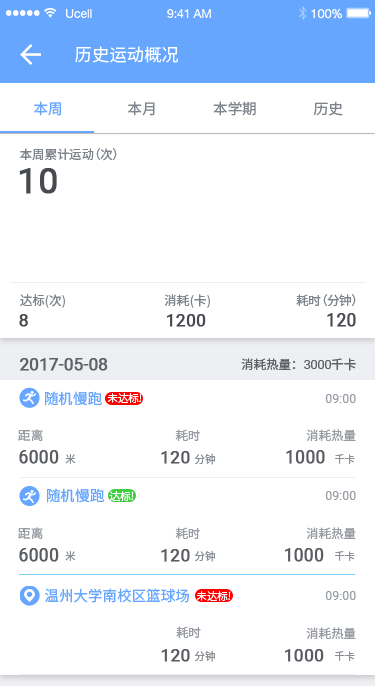
<style>
.page{position:relative;width:375px;height:686px;background:#ffffff}
.page>*{position:absolute;margin:0}
.t1{font:17.3px "NotoSansHans-Regular";color:#ffffff}
.t2{font:14.6px "NotoSansHans-Regular";color:#66a6ff}
.t3{font:14.5px "NotoSansHans-Regular";color:#7e848c}
.t4{font:12.5px "NotoSansHans-Regular";color:#7e848c}
.t5{font:34.9px "Roboto-Regular";color:#474a4f;font-weight:bold}
.t6{font:17.5px "Roboto-Regular";color:#474a4f;font-weight:bold}
.t7{font:17.4px "Roboto-Regular";color:#474a4f;font-weight:bold}
.t8{font:16.6px "Roboto-Regular";color:#5e6166;font-weight:bold}
.t9{font:12.5px "NotoSansHans-Regular";color:#5e6166}
.t10{font:12.5px "Roboto-Regular";color:#5e6166}
.t11{font:14.5px "NotoSansHans-Regular";color:#66a6ff}
.t12{font:10.4px "NotoSansHans-Regular";color:#ffffff}
.t13{font:12.5px "Roboto-Regular";color:#989da3}
.t14{font:12.5px "NotoSansHans-Regular";color:#989da3}
.t15{font:12.4px "NotoSansHans-Regular";color:#989da3}
.t16{font:17.6px "Roboto-Regular";color:#474a4f;font-weight:bold}
.t17{font:10.6px "NotoSansHans-Regular";color:#7e848c}
.t18{font:17.3px "Roboto-Regular";color:#474a4f;font-weight:bold}
.t19{font:10.5px "NotoSansHans-Regular";color:#7e848c}
</style>
<div class="page">
<p class="t1" style="left:75px;top:46px;width:103px;height:17px">历史运动概况</p>
<p class="t2" style="left:34px;top:101px;width:27px;height:15px">本周</p>
<p class="t3" style="left:128px;top:101px;width:27px;height:15px">本月</p>
<p class="t3" style="left:213px;top:101px;width:43px;height:15px">本学期</p>
<p class="t3" style="left:313px;top:101px;width:30px;height:15px">历史</p>
<p class="t4" style="left:19px;top:148px;width:98px;height:13px">本周累计运动（次）</p>
<p class="t5" style="left:19px;top:168px;width:38px;height:26px">10</p>
<p class="t4" style="left:20px;top:294px;width:45px;height:14px">达标(次)</p>
<p class="t4" style="left:164px;top:294px;width:46px;height:14px">消耗(卡)</p>
<p class="t4" style="left:296px;top:294px;width:60px;height:12px">耗时（分钟）</p>
<p class="t6" style="left:19px;top:314px;width:9px;height:13px">8</p>
<p class="t7" style="left:166px;top:314px;width:40px;height:13px">1200</p>
<p class="t6" style="left:327px;top:313px;width:29px;height:14px">120</p>
<p class="t8" style="left:20px;top:358px;width:88px;height:13px">2017-05-08</p>
<p class="t9" style="left:241px;top:358px;width:115px;height:13px">消耗热量：<span class="t10">3000</span>千卡</p>
<p class="t11" style="left:45px;top:391px;width:57px;height:15px">随机慢跑</p>
<p class="t12" style="left:107px;top:393px;width:35px;height:10px">未达标!</p>
<p class="t13" style="left:325px;top:394px;width:31px;height:9px">09:00</p>
<p class="t14" style="left:18px;top:429px;width:25px;height:12px">距离</p>
<p class="t15" style="left:175px;top:429px;width:25px;height:12px">耗时</p>
<p class="t14" style="left:306px;top:429px;width:50px;height:12px">消耗热量</p>
<p class="t16" style="left:19px;top:450px;width:40px;height:14px;opacity:0.9">6000</p>
<p class="t17" style="left:65px;top:454px;width:11px;height:10px;opacity:0.9">米</p>
<p class="t18" style="left:161px;top:451px;width:29px;height:13px;opacity:0.9">120</p>
<p class="t19" style="left:195px;top:453px;width:20px;height:12px;opacity:0.9">分钟</p>
<p class="t6" style="left:286px;top:450px;width:39px;height:14px;opacity:0.9">1000</p>
<p class="t17" style="left:335px;top:454px;width:20px;height:10px;opacity:0.9">千卡</p>
<p class="t11" style="left:47px;top:488px;width:58px;height:15px">随机慢跑</p>
<p class="t12" style="left:109px;top:491px;width:25px;height:10px">达标!</p>
<p class="t13" style="left:325px;top:491px;width:31px;height:9px">09:00</p>
<p class="t14" style="left:18px;top:527px;width:25px;height:12px">距离</p>
<p class="t15" style="left:175px;top:527px;width:25px;height:12px">耗时</p>
<p class="t14" style="left:306px;top:527px;width:50px;height:12px">消耗热量</p>
<p class="t16" style="left:19px;top:548px;width:40px;height:14px;opacity:0.9">6000</p>
<p class="t17" style="left:65px;top:551px;width:11px;height:10px;opacity:0.9">米</p>
<p class="t18" style="left:161px;top:549px;width:29px;height:13px;opacity:0.9">120</p>
<p class="t19" style="left:195px;top:550px;width:20px;height:12px;opacity:0.9">分钟</p>
<p class="t6" style="left:284px;top:548px;width:40px;height:14px;opacity:0.9">1000</p>
<p class="t17" style="left:335px;top:551px;width:20px;height:10px;opacity:0.9">千卡</p>
<p class="t2" style="left:45px;top:588px;width:144px;height:15px">温州大学南校区篮球场</p>
<p class="t12" style="left:196px;top:591px;width:35px;height:10px">未达标!</p>
<p class="t13" style="left:325px;top:591px;width:31px;height:9px">09:00</p>
<p class="t15" style="left:176px;top:626px;width:25px;height:12px">耗时</p>
<p class="t15" style="left:306px;top:627px;width:50px;height:12px">消耗热量</p>
<p class="t18" style="left:161px;top:649px;width:29px;height:13px;opacity:0.9">120</p>
<p class="t19" style="left:195px;top:650px;width:20px;height:12px;opacity:0.9">分钟</p>
<p class="t7" style="left:284px;top:649px;width:40px;height:13px;opacity:0.9">1000</p>
<p class="t19" style="left:335px;top:651px;width:20px;height:10px;opacity:0.9">千卡</p>
</div>
